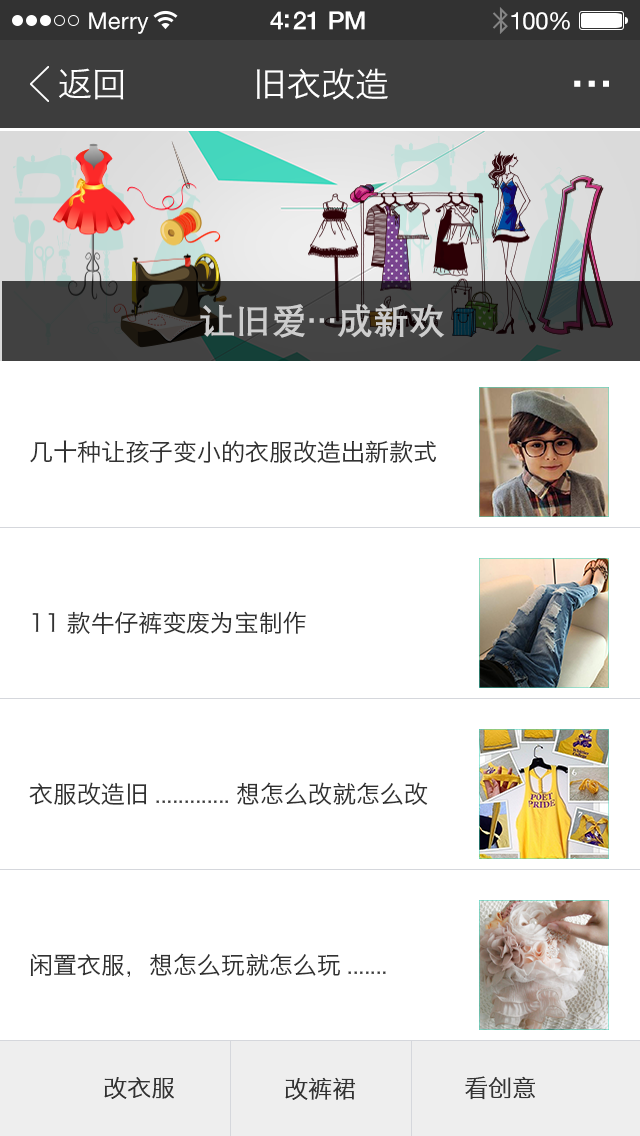
<style>
.page{position:relative;width:640px;height:1136px;background:#ffffff}
.page>*{position:absolute;margin:0}
.t1{font:34px "HiraginoSansGB-W3";color:#ffffff}
.t2{font:60px "HiraginoSansGB-W3";color:#ffffff}
.t3{font:36px "DengXian-Bold";color:#cdcdcd}
.t4{font:24px "HiraginoSansGB-W3";color:#323232}
.t5{font:24px "HiraginoSansGB-W3";color:#333333}
</style>
<div class="page">
<p class="t1" style="left:59px;top:68px;width:65px;height:32px">返回</p>
<p class="t1" style="left:257px;top:68px;width:131px;height:32px">旧衣改造</p>
<p class="t2" style="left:574px;top:80px;width:35px;height:7px">...</p>
<p class="t3" style="left:200px;top:303px;width:245px;height:35px">让旧爱…成新欢</p>
<p class="t4" style="left:30px;top:440px;width:406px;height:24px">几十种让孩子变小的衣服改造出新款式</p>
<p class="t4" style="left:32px;top:611px;width:274px;height:23px">11款牛仔裤变废为宝制作</p>
<p class="t4" style="left:29px;top:782px;width:399px;height:23px">衣服改造旧.............想怎么改就怎么改</p>
<p class="t4" style="left:30px;top:953px;width:356px;height:24px">闲置衣服，想怎么玩就怎么玩.......</p>
<p class="t5" style="left:104px;top:1077px;width:70px;height:22px">改衣服</p>
<p class="t5" style="left:285px;top:1077px;width:71px;height:23px">改裤裙</p>
<p class="t5" style="left:465px;top:1076px;width:70px;height:24px">看创意</p>
</div>
